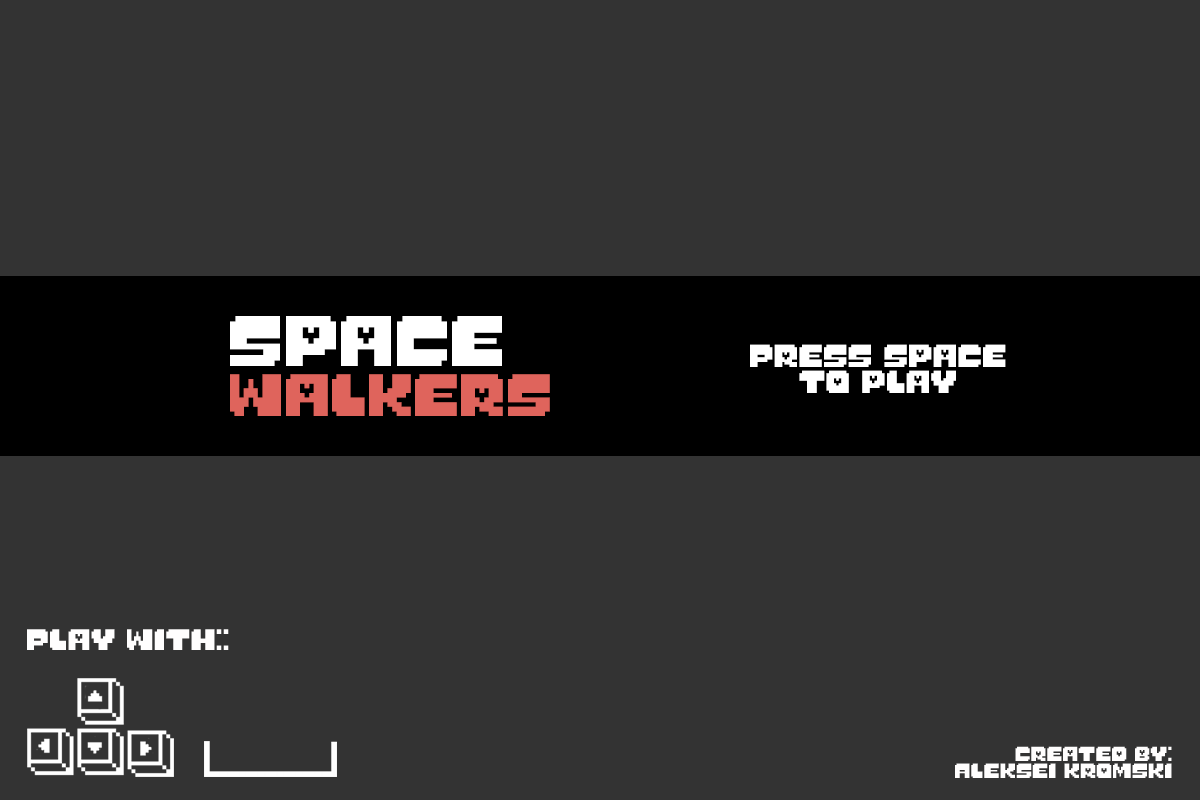
<style>
.page{position:relative;width:1200px;height:800px;background:#333333}
.page>*{position:absolute;margin:0}
.t1{font:41.6px "Undertale";color:#df645c}
.t2{font:12px "Undertale";color:#ffffff}
.t3{font:22.2px "Undertale";color:#ffffff}
.t4{font:20.7px "Undertale";color:#fffefe}
.t5{font:14.6px "Undertale";color:#fffefe}
.t6{font:14.2px "Undertale";color:#fffefe}
</style>
<div class="page">
<p class="t1" style="left:230px;top:316px;width:320px;height:100px"><span class="t2">Space<br></span>Walkers</p>
<p class="t3" style="left:750px;top:344px;width:256px;height:49px;text-align:center">Press space<br>to play</p>
<p class="t4" style="left:27px;top:629px;width:202px;height:21px">Play with::</p>
<p class="t5" style="left:955px;top:746px;width:217px;height:32px;text-align:right"><span class="t6">Created by:<br></span>Aleksei kromski</p>
</div>
